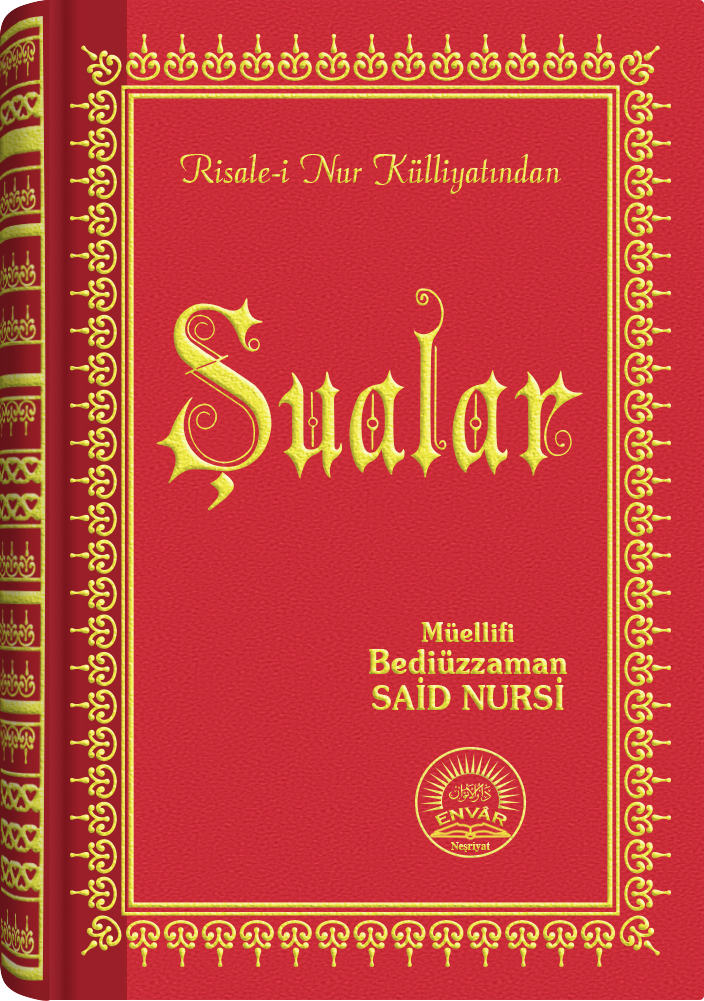
<style>
.page{position:relative;width:704px;height:1001px}
.page>*{position:absolute;margin:0}
.t1{font:45.3px "Barla © 072 Aria ScriptScriptSSi";scale:0.94 1}
.t2{font:232.1px "Barla © 001 Liva Nur";letter-spacing:-0.001em;scale:0.93 1}
.t3{font:33.4px/32.4px "SouvenirITCbyBT-Demi";scale:0.93 1}
.t4{font:27.4px/24.4px "SouvenirITCbyBT-Demi";scale:0.93 1}
.t5{font:33.4px/36.4px "SouvenirITCbyBT-Demi";scale:0.93 1}
.t6{font:15.6px "CopperplateGothic-Bold"}
.t7{font:11.2px "Times-Bold";scale:0.96 1}
</style>
<div class="page">
<p class="t1" style="left:180px;top:154px;width:381px;height:40px">Risale-i Nur Külliyatından</p>
<p class="t2" style="left:156px;top:288px;width:427px;height:223px">Şualar</p>
<p class="t3" style="left:369px;top:622px;width:198px;height:88px;text-align:center"><span class="t4">Müellifi<br></span>Bediüzzaman<br><span class="t5">SAİD NURSİ</span></p>
<p class="t6" style="left:434px;top:806px;width:73px;height:21px">ENVÂR</p>
<p class="t7" style="left:451px;top:842px;width:39px;height:10px">Neşriyat</p>
</div>
